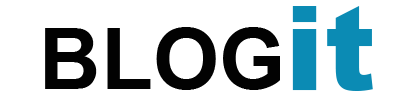
<style>
.page{position:relative;width:400px;height:100px;background:#ffffff}
.page>*{position:absolute;margin:0}
.t1{font:116.6px "Arial-Black";color:#0b8bb4}
.t2{font:85px "Arial-BoldMT";color:#020202}
</style>
<div class="page">
<p class="t1" style="left:292px;top:6px;width:81px;height:85px">it</p>
<p class="t2" style="left:45px;top:27px;width:235px;height:63px">BLOG</p>
</div>
